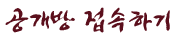
<style>
.page{position:relative;width:180px;height:40px;background:#ffffff}
.page>*{position:absolute;margin:0}
.t1{font:26.9px "JShinYeongBok-Regular";color:#5b0f1c}
</style>
<div class="page">
<p class="t1" style="left:5px;top:7px;width:165px;height:26px">공개방 접속하기</p>
</div>
